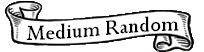
<style>
.page{position:relative;width:204px;height:52px;background:#ffffff}
.page>*{position:absolute;margin:0}
.t1{font:24px "Perpetua";color:#000000}
</style>
<div class="page">
<p class="t1" style="left:26px;top:16px;width:153px;height:24px">Medium Random</p>
</div>
